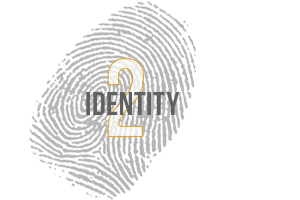
<style>
.page{position:relative;width:300px;height:200px;background:#ffffff}
.page>*{position:absolute;margin:0}
.t1{font:111px "BebasNeue";letter-spacing:0.022em;color:#ffffff}
.t2{font:33px "BebasNeue";letter-spacing:0.022em;color:#616161}
</style>
<div class="page">
<p class="t1" style="left:107px;top:58px;width:37px;height:79px">2</p>
<p class="t2" style="left:86px;top:92px;width:94px;height:23px">IDENTITY</p>
</div>
